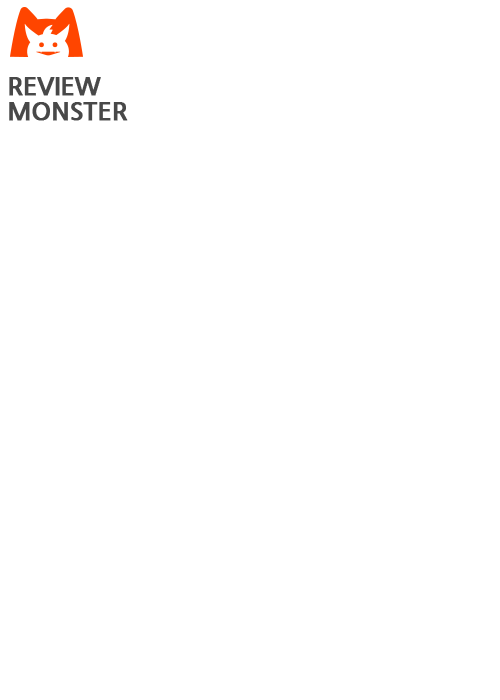
<style>
.page{position:relative;width:500px;height:700px;background:#ffffff}
.page>*{position:absolute;margin:0}
.t1{font:25px/25px "NanumGothicBold";letter-spacing:-0.02em;color:#484848;font-weight:bold}
</style>
<div class="page">
<p class="t1" style="left:9px;top:77px;width:119px;height:44px">REVIEW<br>MONSTER</p>
</div>
